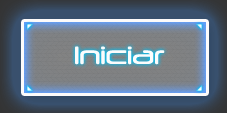
<style>
.page{position:relative;width:227px;height:113px}
.page>*{position:absolute;margin:0}
.t1{font:24px "Neuropol-Regular";color:#fcfcfc}
</style>
<div class="page">
<p class="t1" style="left:75px;top:46px;width:90px;height:19px">Iniciar</p>
</div>
